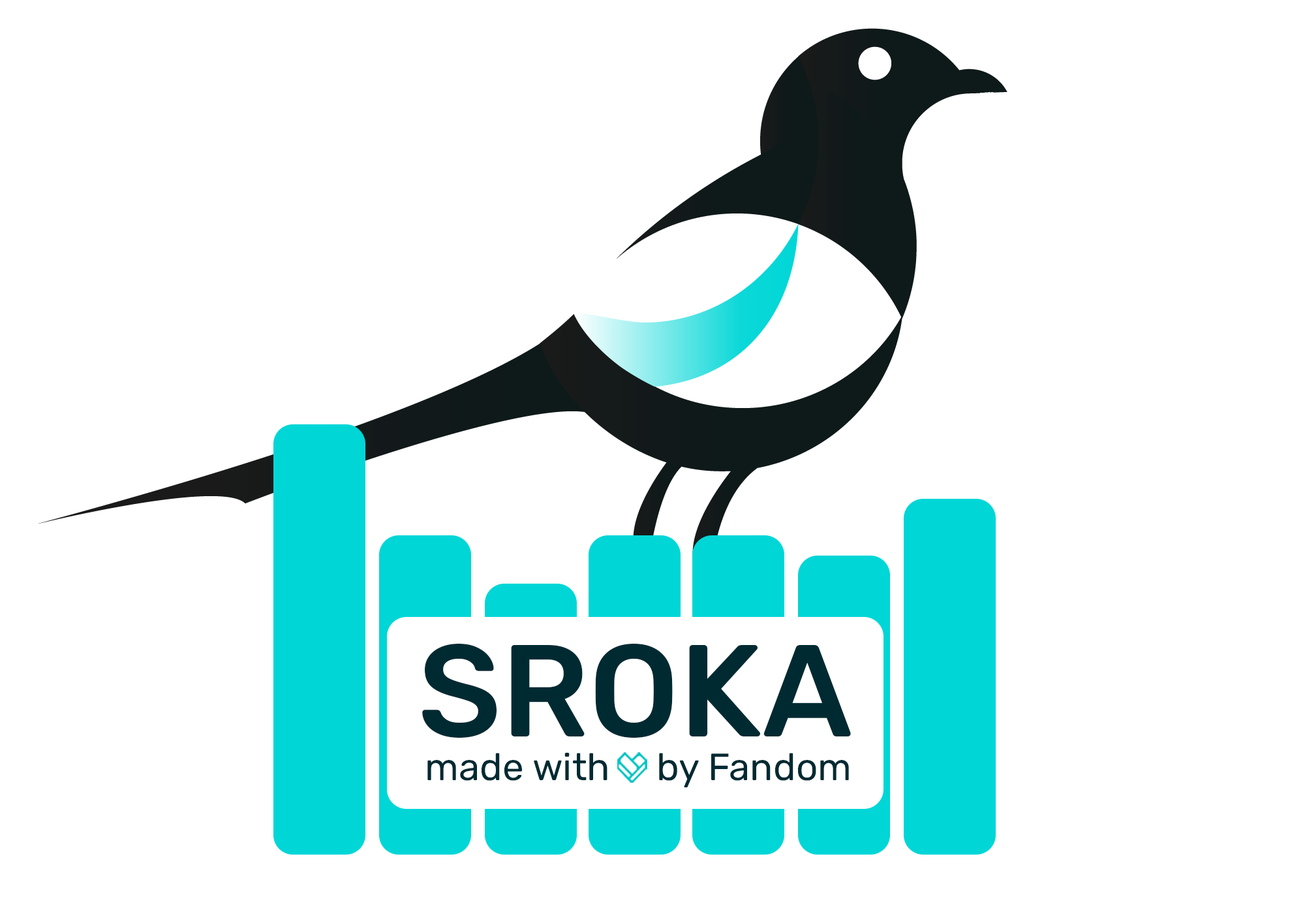
<style>
.page{position:relative;width:1305px;height:914px;background:#ffffff}
.page>*{position:absolute;margin:0}
.t1{font:38.1px/21.8px "Rubik-Regular";color:#002a32}
.t2{font:130.5px/21.8px "Rubik-Medium";color:#002a32}
</style>
<div class="page">
<p class="t1" style="left:422px;top:643px;width:429px;height:144px;text-align:center"><span class="t2">SROKA<br><br> </span>made with     by Fandom</p>
</div>
